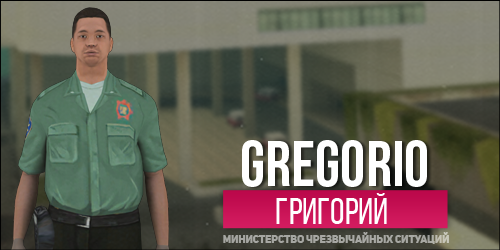
<style>
.page{position:relative;width:500px;height:250px}
.page>*{position:absolute;margin:0}
.t1{font:64.4px "BebasNeue";color:#ffffff}
.t2{font:36.8px "BebasNeueRegular";color:#ffffff}
.t3{font:10.6px "UniSansHeavyCaps";color:#a6a6a2}
</style>
<div class="page">
<p class="t1" style="left:242px;top:140px;width:185px;height:47px">gregorio</p>
<p class="t2" style="left:276px;top:193px;width:111px;height:31px">григорий</p>
<p class="t3" style="left:223px;top:232px;width:226px;height:12px">МИНИСТЕРСТВО ЧРЕЗВЫЧАЙНЫХ СИТУАЦИЙ</p>
</div>
